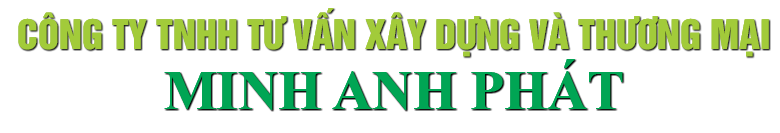
<style>
.page{position:relative;width:780px;height:133px;background:#ffffff}
.page>*{position:absolute;margin:0}
.t1{font:37.1px "UTM-HelvetIns";color:#a2cb3a;text-transform:uppercase}
.t2{font:55.7px "TimesNewRomanPS-BoldMT";color:#00a554;text-transform:uppercase}
</style>
<div class="page">
<p class="t1" style="left:18px;top:8px;width:751px;height:49px">CÔNG TY TNHH TƯ VẤN XÂY DỰNG VÀ THƯƠNG MẠI</p>
<p class="t2" style="left:164px;top:59px;width:459px;height:51px">MINH ANH PHÁT</p>
</div>
